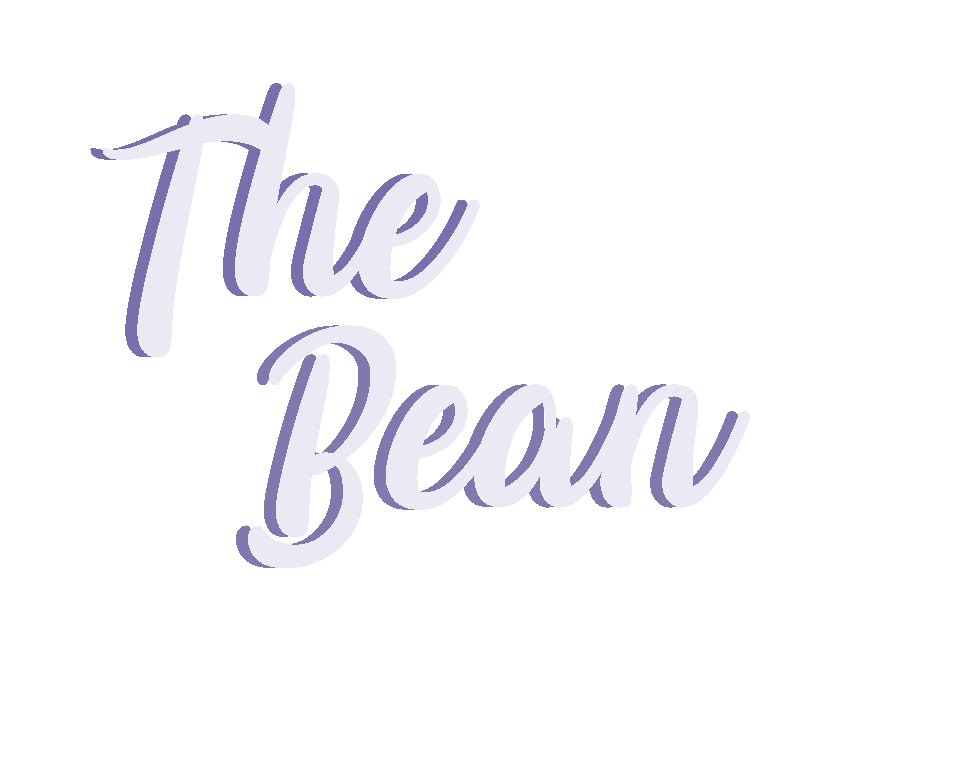
<style>
.page{position:relative;width:960px;height:771px;background:#ffffff}
.page>*{position:absolute;margin:0}
.t1{font:250px "Certhas"}
</style>
<div class="page">
<p class="t1" style="left:90px;top:83px;width:378px;height:274px">The</p>
<p class="t1" style="left:236px;top:325px;width:502px;height:243px">Bean</p>
</div>
